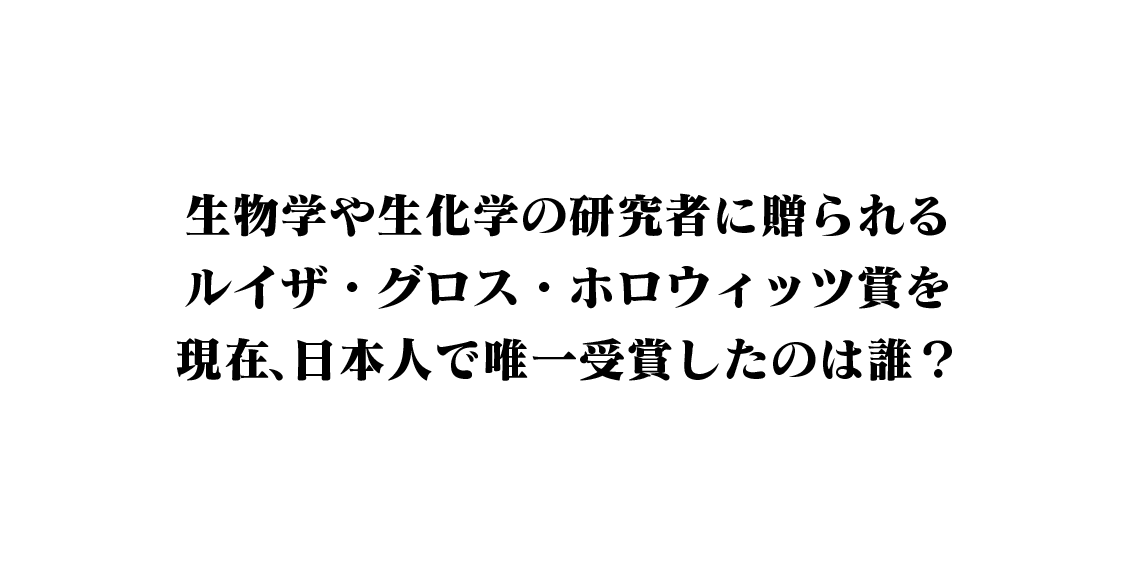
<style>
.page{position:relative;width:1130px;height:575px;background:#ffffff}
.page>*{position:absolute;margin:0}
.t1{font:48px/72px "MatissePro-EB";color:#000000}
</style>
<div class="page">
<p class="t1" style="left:176px;top:193px;width:776px;height:188px;text-align:center">生物学や生化学の研究者に贈られる<br>ルイザ・グロス・ホロウィッツ賞を<br>現在、日本人で唯一受賞したのは誰？</p>
</div>
